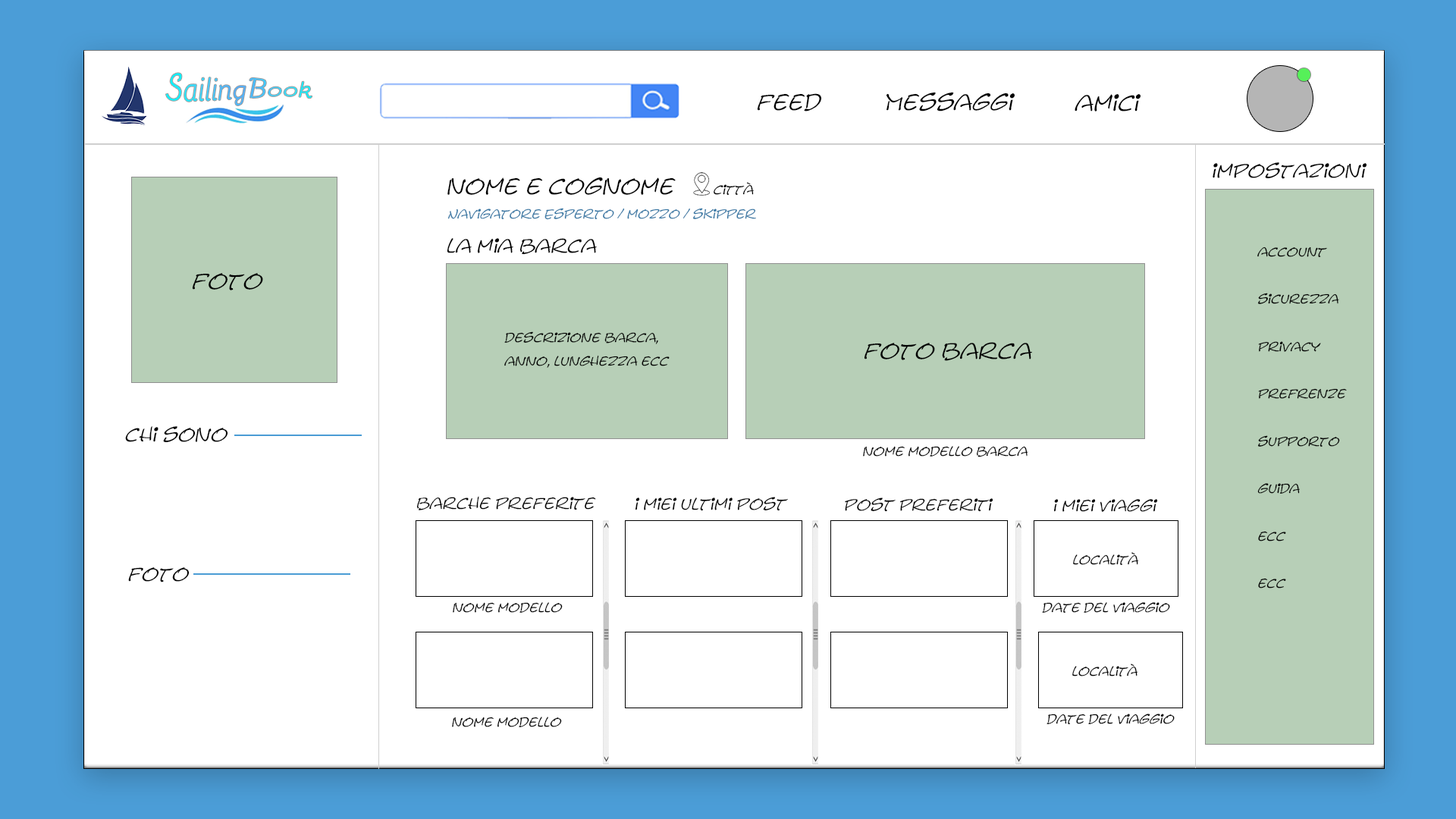
<style>
.page{position:relative;width:1456px;height:819px;background:#ffffff}
.page>*{position:absolute;margin:0}
.t1{font:25.3px "Bellota-Regular";letter-spacing:0.01em;font-style:italic}
.t2{font:31.6px "Bellota-Regular";letter-spacing:0.01em;font-style:italic}
.t3{font:22.1px "Calvin";letter-spacing:0.01em;color:#000000;font-style:italic}
.t4{font:19px "Calvin";letter-spacing:0.01em;color:#000000;font-style:italic}
.t5{font:12.6px "Calvin";letter-spacing:0.01em;color:#000000;font-style:italic}
.t6{font:12.6px "Calvin";letter-spacing:0.01em;color:#3979a5;font-style:italic}
.t7{font:12.6px/23.7px "Calvin";letter-spacing:0.01em;color:#000000;font-style:italic}
.t8{font:15.8px "Calvin";letter-spacing:0.01em;color:#000000;font-style:italic}
</style>
<div class="page">
<p class="t1" style="left:165px;top:73px;width:147px;height:32px"><span class="t2">S</span>ailing<span class="t2">B</span>ook</p>
<p class="t3" style="left:757px;top:93px;width:64px;height:18px">feed</p>
<p class="t3" style="left:886px;top:92px;width:129px;height:19px">Messaggi</p>
<p class="t3" style="left:1075px;top:94px;width:66px;height:17px">amici</p>
<p class="t4" style="left:1213px;top:162px;width:153px;height:17px">impostazioni</p>
<p class="t3" style="left:447px;top:177px;width:229px;height:18px">nome e cognome</p>
<p class="t5" style="left:714px;top:182px;width:40px;height:14px">città</p>
<p class="t6" style="left:447px;top:208px;width:309px;height:12px">Navigatore Esperto / mozzo / skipper</p>
<p class="t4" style="left:447px;top:238px;width:150px;height:17px">la mia barca</p>
<p class="t7" style="left:1257px;top:246px;width:90px;height:342px">account<br><br>sicurezza<br><br>privacy<br><br>prefrenze<br><br>supporto<br><br>guida<br><br>ecc<br><br>ecc</p>
<p class="t3" style="left:192px;top:273px;width:71px;height:17px">foto</p>
<p class="t7" style="left:504px;top:331px;width:166px;height:37px">descrizione barca,<br>anno, lunghezza ecc</p>
<p class="t3" style="left:864px;top:342px;width:168px;height:19px">foto barca</p>
<p class="t4" style="left:125px;top:426px;width:103px;height:17px">chi sono</p>
<p class="t5" style="left:863px;top:446px;width:165px;height:11px">nome modello barca</p>
<p class="t8" style="left:416px;top:496px;width:180px;height:14px">barche preferite</p>
<p class="t8" style="left:635px;top:497px;width:153px;height:14px">i miei ultimi post</p>
<p class="t8" style="left:845px;top:497px;width:148px;height:15px">post preferiti</p>
<p class="t8" style="left:1054px;top:499px;width:104px;height:13px">i miei viaggi</p>
<p class="t5" style="left:1073px;top:552px;width:66px;height:14px">località</p>
<p class="t4" style="left:128px;top:567px;width:61px;height:15px">foto</p>
<p class="t5" style="left:453px;top:602px;width:110px;height:11px">nome modello</p>
<p class="t5" style="left:1042px;top:602px;width:128px;height:11px">date del viaggio</p>
<p class="t5" style="left:1072px;top:664px;width:66px;height:13px">località</p>
<p class="t5" style="left:1046px;top:714px;width:129px;height:11px">date del viaggio</p>
<p class="t5" style="left:452px;top:717px;width:110px;height:10px">nome modello</p>
</div>
